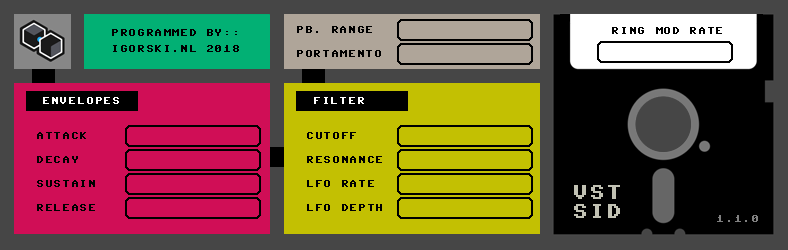
<style>
.page{position:relative;width:788px;height:250px;background:#000000}
.page>*{position:absolute;margin:0}
.t1{font:8px/16px "CommodoreServer";letter-spacing:0.075em;color:#000000}
.t2{font:8px/24px "CommodoreServer";letter-spacing:0.08em;color:#000000}
.t3{font:8px "CommodoreServer";letter-spacing:0.08em;color:#000000}
.t4{font:8px "CommodoreServer";letter-spacing:0.08em;color:#ffffff}
.t5{font:16px "CommodoreServer";letter-spacing:0.04em;color:#c1c1b3}
.t6{font:8px "CommodoreServer";letter-spacing:0.08em;color:#808080}
</style>
<div class="page">
<p class="t1" style="left:112px;top:29px;width:127px;height:23px">PROGRAMMED BY::<br>IGORSKI.NL 2018</p>
<p class="t2" style="left:297px;top:26px;width:84px;height:31px">PB. RANGE<br>PORTAMENTO</p>
<p class="t3" style="left:612px;top:27px;width:110px;height:7px">RING MOD RATE</p>
<p class="t4" style="left:43px;top:97px;width:76px;height:7px">ENVELOPES</p>
<p class="t4" style="left:314px;top:97px;width:50px;height:7px">FILTER</p>
<p class="t2" style="left:37px;top:132px;width:58px;height:79px">ATTACK<br>DECAY<br>SUSTAIN<br>RELEASE</p>
<p class="t2" style="left:307px;top:132px;width:75px;height:79px">CUTOFF<br>RESONANCE<br>LFO RATE<br>LFO DEPTH</p>
<p class="t5" style="left:574px;top:185px;width:46px;height:33px">VST<br>SID</p>
<p class="t6" style="left:717px;top:215px;width:41px;height:7px">1.1.0</p>
</div>
